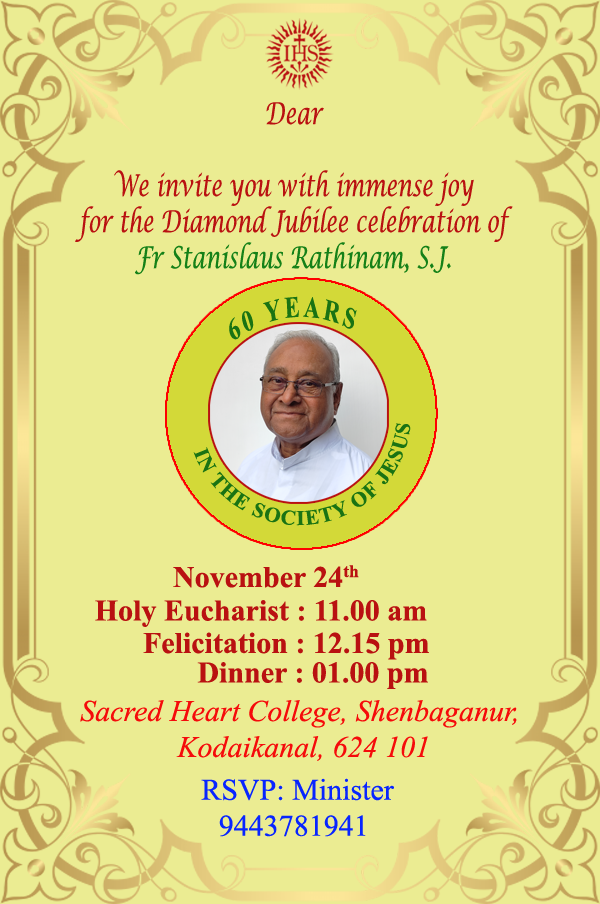
<style>
.page{position:relative;width:600px;height:904px;background:#ebec92}
.page>*{position:absolute;margin:0}
.t1{font:30px "LucidaCalligraphy-Italic";color:#b91111;scale:0.7 1}
.t2{font:30px "LucidaCalligraphy-Italic";color:#158118;scale:0.7 1}
.t3{font:30px "TimesNewRomanPS-BoldMT";letter-spacing:0.14em;color:#1a7313;scale:0.75 1}
.t4{font:20.9px "TimesNewRomanPS-BoldMT";letter-spacing:0.06em;color:#1a7313}
.t5{font:30px "TimesNewRomanPS-BoldMT";color:#b91111}
.t6{font:30px "TimesNewRomanPS-BoldMT";color:#a2b5da}
.t7{font:30px "TimesNewRomanPS-ItalicMT";color:#f50b0b}
.t8{font:30px "TimesNewRomanPSMT";color:#0825ff}
</style>
<div class="page">
<p class="t1" style="left:75px;top:102px;width:438px;height:173px;text-align:center">Dear<br>         <br>We invite you with immense joy<br> for the Diamond Jubilee celebration of <br><span class="t2">Fr Stanislaus Rathinam, S.J.</span></p>
<p class="t3" style="left:229px;top:296px;width:128px;height:44px">60 YEARS</p>
<p class="t4" style="left:193px;top:423px;width:218px;height:103px">IN THE SOCIETY OF JESUS</p>
<p class="t5" style="left:95px;top:600px;width:332px;height:27px">Holy Eucharist : 11.00 am</p>
<p class="t5" style="left:143px;top:632px;width:286px;height:28px">Felicitation : 12.15 pm</p>
<p class="t5" style="left:197px;top:662px;width:231px;height:27px"><span class="t6">                           </span>Dinner : 01.00 pm</p>
<p class="t7" style="left:80px;top:700px;width:437px;height:61px;text-align:center">Sacred Heart College, Shenbaganur, <br>Kodaikanal, 624 101</p>
<p class="t8" style="left:201px;top:778px;width:193px;height:59px;text-align:center">RSVP: Minister<br>9443781941</p>
</div>
